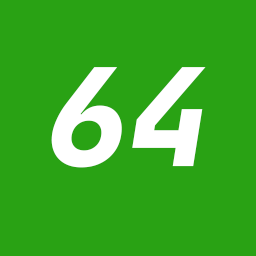
<style>
.page{position:relative;width:256px;height:256px;background:#29a214}
.page>*{position:absolute;margin:0}
.t1{font:135.4px "JetBrainsMono-ExtraBoldItalic";color:#ffffff}
</style>
<div class="page">
<p class="t1" style="left:51px;top:67px;width:155px;height:101px">64</p>
</div>
